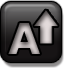
<style>
.page{position:relative;width:64px;height:68px}
.page>*{position:absolute;margin:0}
.t1{font:41.7px "Verdana-Bold"}
</style>
<div class="page">
<p class="t1" style="left:8px;top:23px;width:32px;height:31px">A</p>
</div>
